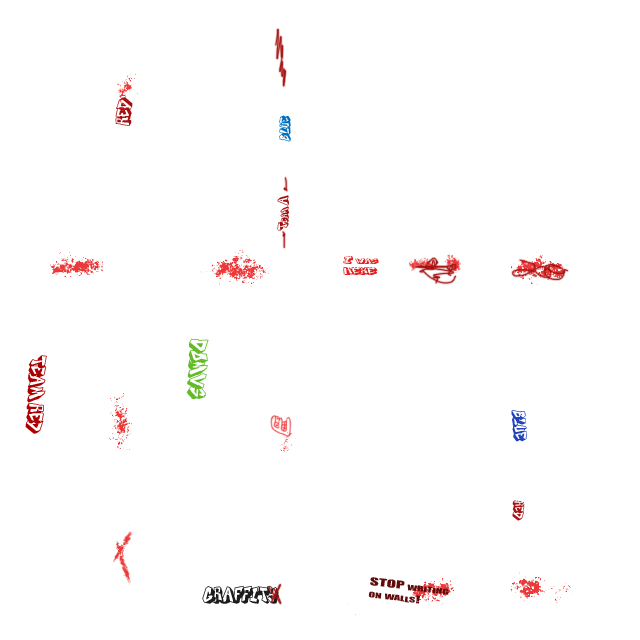
<style>
.page{position:relative;width:640px;height:640px;background:#ffffff}
.page>*{position:absolute;margin:0}
.t1{font:19.2px "DOCALLISME-ON-STREET-Regular";color:#a40f0f;font-variant:small-caps}
.t2{font:13.7px "DOCALLISME-ON-STREET-Regular";color:#006fbd;font-variant:small-caps}
.t3{font:13.7px "DOCALLISME-ON-STREET-Regular";color:#a40f0f;font-variant:small-caps}
.t4{font:9.3px "DOCALLISME-ON-STREET-Regular";color:#e22121;font-variant:small-caps;scale:2.01 1}
.t5{font:23.3px "DOCALLISME-ON-STREET-Regular";color:#63bb28;font-variant:small-caps}
.t6{font:21px "DOCALLISME-ON-STREET-Regular";color:#ab0000;font-variant:small-caps}
.t7{font:17.1px "DOCALLISME-ON-STREET-Regular";color:#2343bc;font-variant:small-caps}
.t8{font:13.7px "DOCALLISME-ON-STREET-Regular";color:#a41414;font-variant:small-caps}
.t9{font:10px "Impact";color:#600c0c;font-variant:small-caps;scale:1.71 1}
.t10{font:30px "DOCALLISME-ON-STREET-Regular";color:#1c1c1c;font-variant:small-caps}
</style>
<div class="page">
<p class="t1" style="left:115px;top:97px;width:18px;height:29px;rotate:-87deg">RED</p>
<p class="t2" style="left:279px;top:115px;width:12px;height:27px;rotate:-89deg">BLUE</p>
<p class="t3" style="left:277px;top:195px;width:12px;height:36px;rotate:-89deg">Team A</p>
<p class="t4" style="left:343px;top:256px;width:36px;height:19px">I was<br>HERE</p>
<p class="t5" style="left:186px;top:338px;width:23px;height:62px;rotate:93deg">DOMVS</p>
<p class="t6" style="left:25px;top:355px;width:22px;height:79px;rotate:93deg">TEAM RED</p>
<p class="t7" style="left:511px;top:410px;width:16px;height:32px;rotate:86deg">BLUE</p>
<p class="t8" style="left:512px;top:500px;width:13px;height:21px;rotate:91deg">RED</p>
<p class="t9" style="left:368px;top:577px;width:81px;height:27px;rotate:7deg">STOP writing<br>on walls!</p>
<p class="t10" style="left:202px;top:585px;width:77px;height:19px">graffity</p>
</div>
